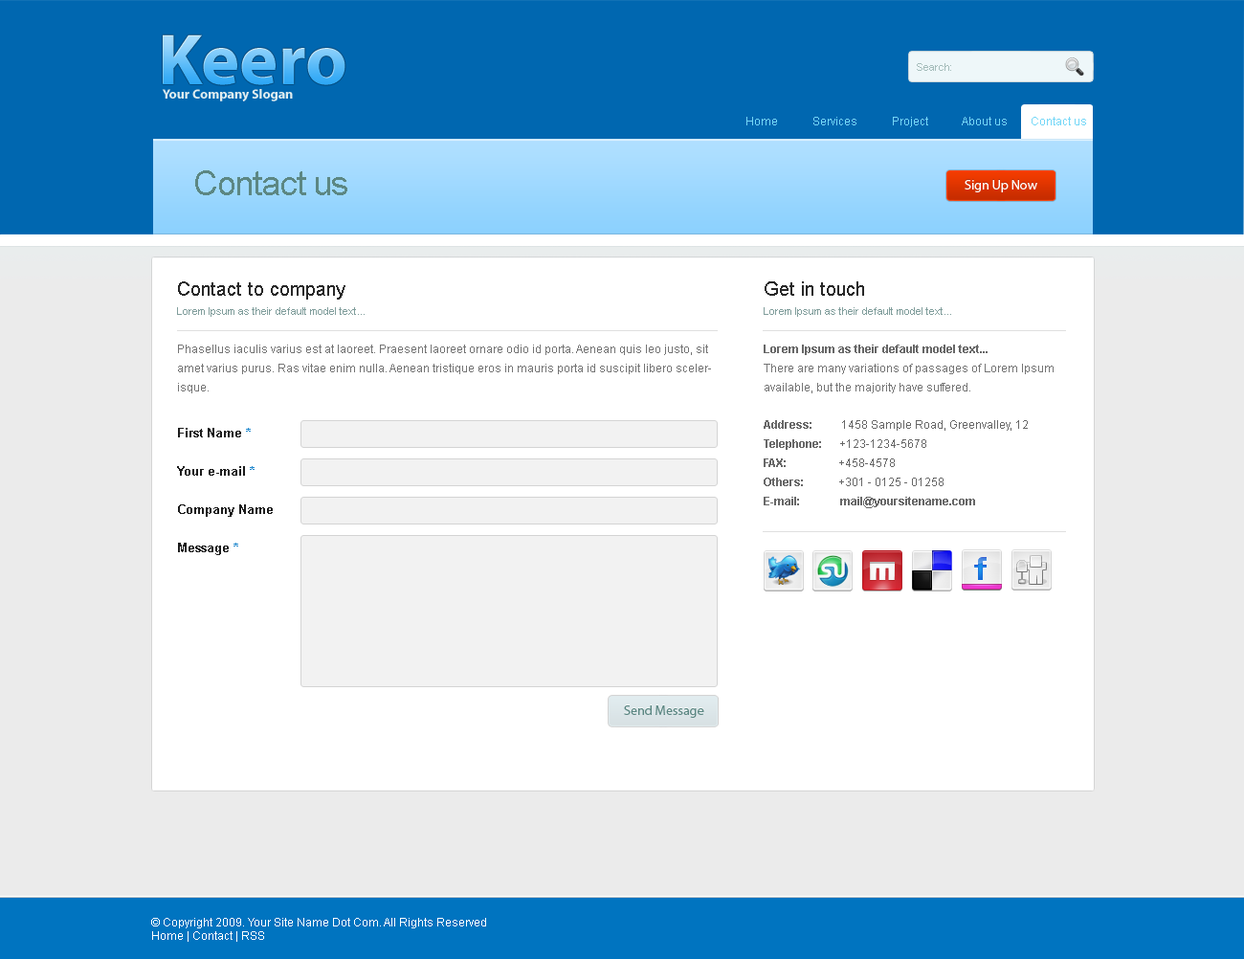
<style>
.page{position:relative;width:1244px;height:959px;background:#ffffff}
.page>*{position:absolute;margin:0}
.t1{font:72.9px "MyriadPro-Bold"}
.t2{font:10.5px "ArialMT";color:#a5bdbb}
.t3{font:13.4px "MyriadPro-Bold";color:#e1ecef}
.t4{font:11.5px "ArialMT";color:#75d7f7}
.t5{font:34.4px "ArialMT";letter-spacing:-0.025em;color:#5c8783}
.t6{font:13.4px "MyriadPro-Regular"}
.t7{font:13.4px "MyriadPro-Regular";color:#ffffff}
.t8{font:11.5px/19.1px "ArialMT";color:#747474}
.t9{font:19.1px/19.1px "ArialMT";color:#282828}
.t10{font:10.5px/19.1px "ArialMT";color:#819e9c}
.t11{font:11.5px/19.1px "Arial-BoldMT";color:#676767}
.t12{font:11.5px/19.1px "Arial-ItalicMT";color:#819e9c}
.t13{font:11.5px/19.1px "ArialMT";color:#ea3900;text-decoration:underline}
.t14{font:11.5px/19.1px "ArialMT";color:#676767}
.t15{font:12.4px/19.1px "Arial-BoldMT";color:#1c1c1c}
.t16{font:12.4px/19.1px "Arial-BoldMT";color:#278ccf}
.t17{font:13.4px "MyriadPro-Regular";color:#5c8783}
.t18{font:11.5px "ArialMT";color:#ffffff}
</style>
<div class="page">
<p class="t1" style="left:163px;top:34px;width:182px;height:51px">Keero</p>
<p class="t2" style="left:917px;top:63px;width:34px;height:8px">Search:</p>
<p class="t3" style="left:162px;top:89px;width:131px;height:12px">Your Company Slogan</p>
<p class="t4" style="left:746px;top:117px;width:340px;height:10px">Home            Services            Project            About us        Contact us</p>
<p class="t5" style="left:195px;top:170px;width:152px;height:25px">Contact us</p>
<p class="t6" style="left:964px;top:179px;width:73px;height:12px">Sign Up Now</p>
<p class="t7" style="left:964px;top:180px;width:73px;height:12px">Sign Up Now</p>
<p class="t8" style="left:177px;top:281px;width:534px;height:112px"><span class="t9">Contact to company<br></span><span class="t10">Lorem Ipsum as their default model text...<br></span><br>Phasellus iaculis varius est at laoreet. Praesent laoreet ornare odio id porta. Aenean quis leo justo, sit amet varius purus. Ras vitae enim nulla. Aenean tristique eros in mauris porta id suscipit libero scelerisque.<br><br>Sollicitudin vel sollicitudin qui facilisis non massaNam id jus nisl ullamcorper laoreet nec ut diam. <br>Nam eget nisi dui, vita hendrerit risus. Nunc non mas neque, at rhoncus nulla.Vivamus in metus nisi, ut gravida dolor. Pellentesque fermentum aliquam interdum. Mauris ligula dui, gravida nec tempus mollis, tempor at odio. Ut porttitor, orci sagittis pretium varius, felis sapien pharetra eros, quis fermentum dui ligula eget justo.</p>
<p class="t8" style="left:764px;top:281px;width:289px;height:112px"><span class="t9">Get in touch<br></span><span class="t10">Lorem Ipsum as their default model text...<br><br></span><span class="t11">Lorem Ipsum as their default model text...<br></span>There are many variations of passages of Lorem Ipsum available, but the majority have suffered.<br><span class="t12">19-11-09 - photography</span> - <span class="t13">2 comments<br><br></span><span class="t11">Lorem Ipsum as their default model text...<br></span>All the Lorem Ipsum generators on the Internet tend to repeat predefined chunks as necessary.<br><span class="t12">19-11-09 - photography </span>- <span class="t13">3 comments</span></p>
<p class="t11" style="left:764px;top:420px;width:264px;height:88px">Address:<span class="t14">          1458 Sample Road, Greenvalley, 12<br></span>Telephone:<span class="t14">      +123-1234-5678<br></span>FAX:<span class="t14">                  +458-4578<br></span>Others:<span class="t14">            +301 - 0125 - 01258<br></span>E-mail:              mail@yoursitename.com</p>
<p class="t15" style="left:177px;top:428px;width:96px;height:127px">First Name<span class="t16"> *<br><br></span>Your e-mail <span class="t16">*<br><br></span>Company Name<br><br>Message<span class="t16"> *</span></p>
<p class="t6" style="left:624px;top:704px;width:80px;height:13px">Send Message</p>
<p class="t17" style="left:624px;top:705px;width:80px;height:13px">Send Message</p>
<p class="t18" style="left:151px;top:918px;width:335px;height:23px">© Copyright 2009. Your Site Name Dot Com. All Rights Reserved<br>Home | Contact | RSS</p>
</div>
